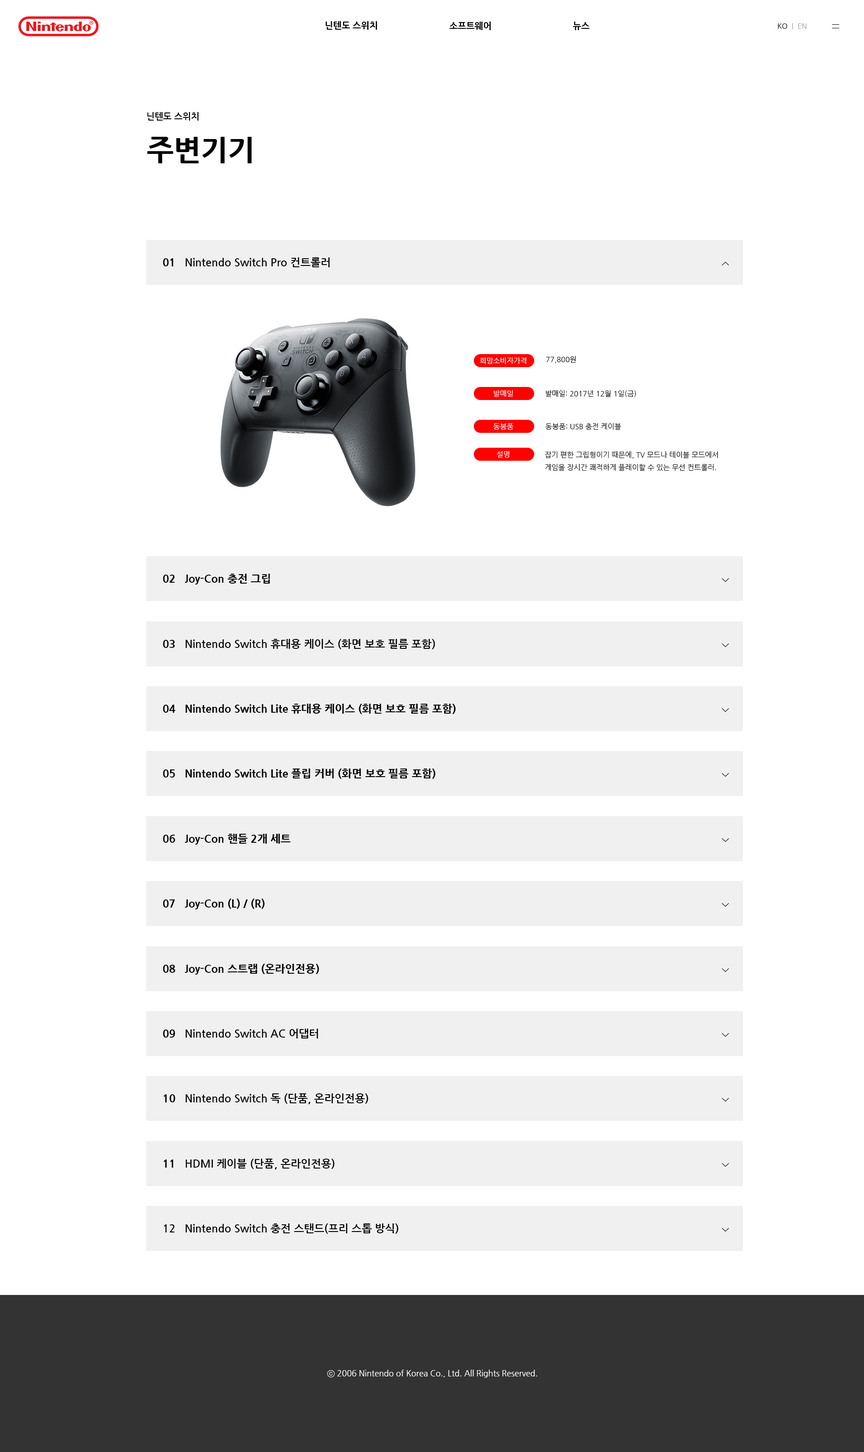
<style>
.page{position:relative;width:864px;height:1452px;background:#ffffff}
.page>*{position:absolute;margin:0}
.t1{font:9px "NanumGothicExtraBold";color:#000000}
.t2{font:7.2px "NanumGothic";color:#000000}
.t3{font:7.2px "NanumGothic";color:#a3a3a3}
.t4{font:9px "NanumGothicBold";color:#010000}
.t5{font:28.8px "NanumGothicExtraBold";color:#000000}
.t6{font:10.8px "NanumGothicBold";color:#000000}
.t7{font:10.8px "NanumGothicExtraBold";color:#000000}
.t8{font:7.2px "NanumGothic";color:#ffffff}
.t9{font:8.1px "NanumGothic";color:#ffffff}
</style>
<div class="page">
<p class="t1" style="left:325px;top:21px;width:52px;height:9px">닌텐도 스위치</p>
<p class="t1" style="left:449px;top:22px;width:42px;height:8px">소프트웨어</p>
<p class="t1" style="left:573px;top:22px;width:17px;height:8px">뉴스</p>
<p class="t2" style="left:778px;top:23px;width:10px;height:6px">KO</p>
<p class="t3" style="left:792px;top:23px;width:14px;height:6px">|  EN</p>
<p class="t4" style="left:147px;top:112px;width:51px;height:9px">닌텐도 스위치</p>
<p class="t5" style="left:147px;top:137px;width:105px;height:26px">주변기기</p>
<p class="t6" style="left:163px;top:257px;width:167px;height:10px"><span class="t7">01   </span>Nintendo Switch Pro 컨트롤러</p>
<p class="t8" style="left:480px;top:357px;width:46px;height:7px">희망소비자가격</p>
<p class="t2" style="left:546px;top:356px;width:30px;height:7px">77,800원</p>
<p class="t8" style="left:494px;top:390px;width:19px;height:7px">발매일</p>
<p class="t2" style="left:546px;top:390px;width:90px;height:7px">발매일: 2017년 12월 1일(금)</p>
<p class="t8" style="left:493px;top:423px;width:20px;height:7px">동봉품</p>
<p class="t2" style="left:545px;top:423px;width:76px;height:7px">동봉품: USB 충전 케이블</p>
<p class="t8" style="left:497px;top:451px;width:12px;height:7px">설명</p>
<p class="t2" style="left:545px;top:451px;width:173px;height:20px">잡기 편한 그립형이기 때문에, TV 모드나 테이블 모드에서<br>게임을 장시간 쾌적하게 플레이할 수 있는 무선 컨트롤러.</p>
<p class="t7" style="left:163px;top:574px;width:107px;height:11px">02   Joy-Con 충전 그립</p>
<p class="t6" style="left:163px;top:639px;width:272px;height:10px"><span class="t7">03   </span>Nintendo Switch 휴대용 케이스 (화면 보호 필름 포함)</p>
<p class="t7" style="left:163px;top:704px;width:293px;height:10px">04   Nintendo Switch Lite 휴대용 케이스 (화면 보호 필름 포함)</p>
<p class="t7" style="left:163px;top:769px;width:273px;height:10px">05   Nintendo Switch Lite 플립 커버 (화면 보호 필름 포함)</p>
<p class="t7" style="left:163px;top:834px;width:128px;height:11px">06   Joy-Con 핸들 2개 세트</p>
<p class="t7" style="left:163px;top:899px;width:102px;height:10px">07   Joy-Con (L) / (R)</p>
<p class="t7" style="left:163px;top:964px;width:156px;height:11px">08   Joy-Con 스트랩 (온라인전용)</p>
<p class="t6" style="left:163px;top:1029px;width:155px;height:10px"><span class="t7">09   </span>Nintendo Switch AC 어댑터</p>
<p class="t6" style="left:163px;top:1094px;width:205px;height:10px"><span class="t7">10   </span>Nintendo Switch 독 (단품, 온라인전용)</p>
<p class="t6" style="left:163px;top:1159px;width:171px;height:11px"><span class="t7">11   </span>HDMI 케이블 (단품, 온라인전용)</p>
<p class="t6" style="left:164px;top:1224px;width:234px;height:10px">12   Nintendo Switch 충전 스탠드(프리 스톱 방식)</p>
<p class="t9" style="left:327px;top:1370px;width:210px;height:8px">ⓒ 2006 Nintendo of Korea Co., Ltd. All Rights Reserved.</p>
</div>
